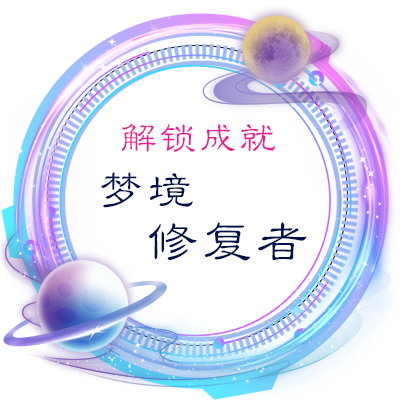
<style>
.page{position:relative;width:400px;height:400px;background:#ffffff}
.page>*{position:absolute;margin:0}
.t1{font:40px "STLibianSC-Regular";color:#ec1e8f}
.t2{font:50px "STLibianSC-Regular";color:#001149}
.t3{font:55px "STLibianSC-Regular";color:#001149}
</style>
<div class="page">
<p class="t1" style="left:122px;top:123px;width:154px;height:29px">解锁成就</p>
<p class="t2" style="left:101px;top:172px;width:92px;height:36px">梦境</p>
<p class="t3" style="left:149px;top:222px;width:158px;height:39px">修复者</p>
</div>
